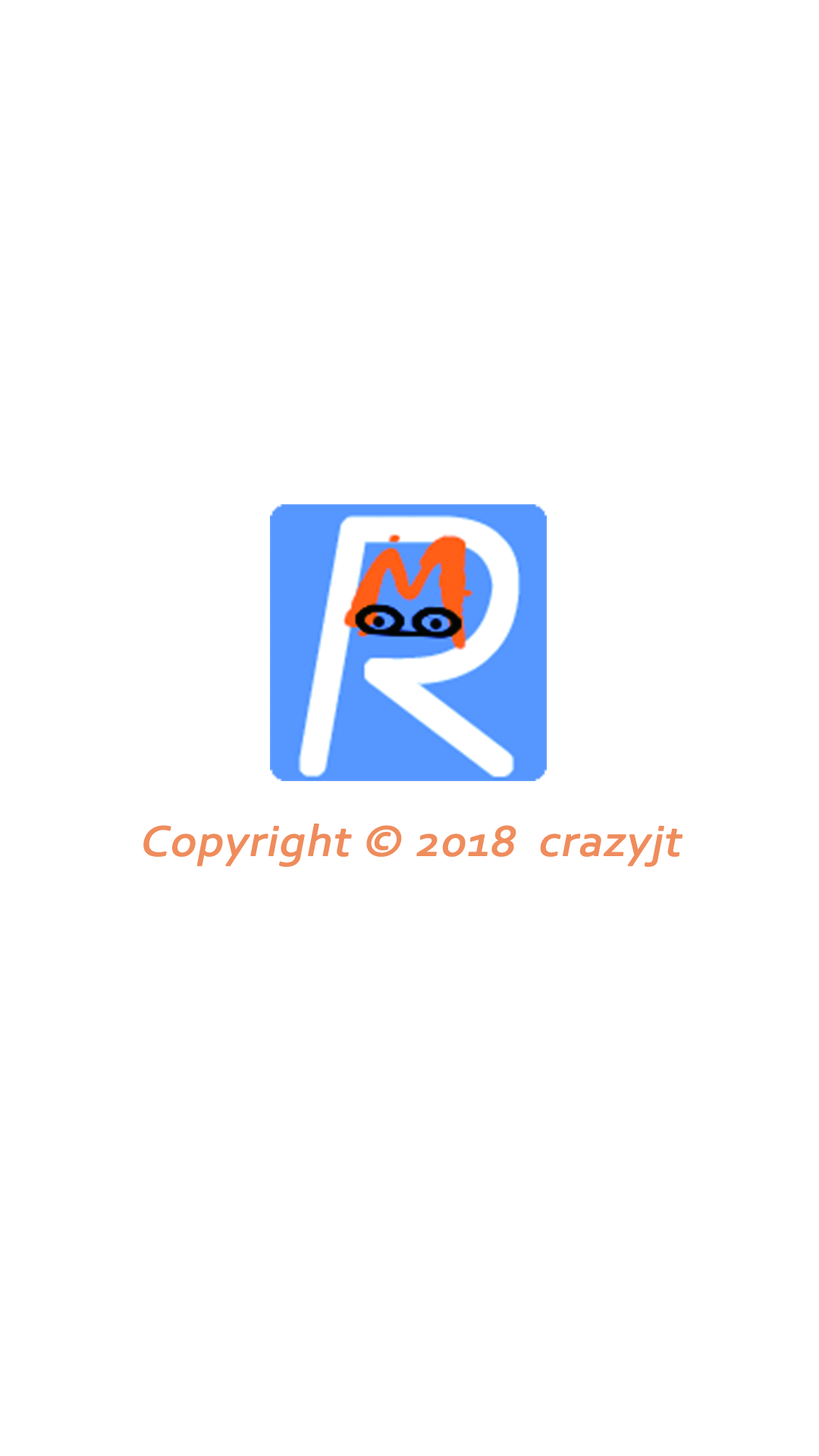
<style>
.page{position:relative;width:819px;height:1456px;background:#ffffff}
.page>*{position:absolute;margin:0}
.t1{font:44.2px "Corbel";color:#ef8c5c;font-weight:bold;font-style:italic;scale:1.09 1}
</style>
<div class="page">
<p class="t1" style="left:143px;top:824px;width:540px;height:43px">Copyright © 2018  crazyjt</p>
</div>
